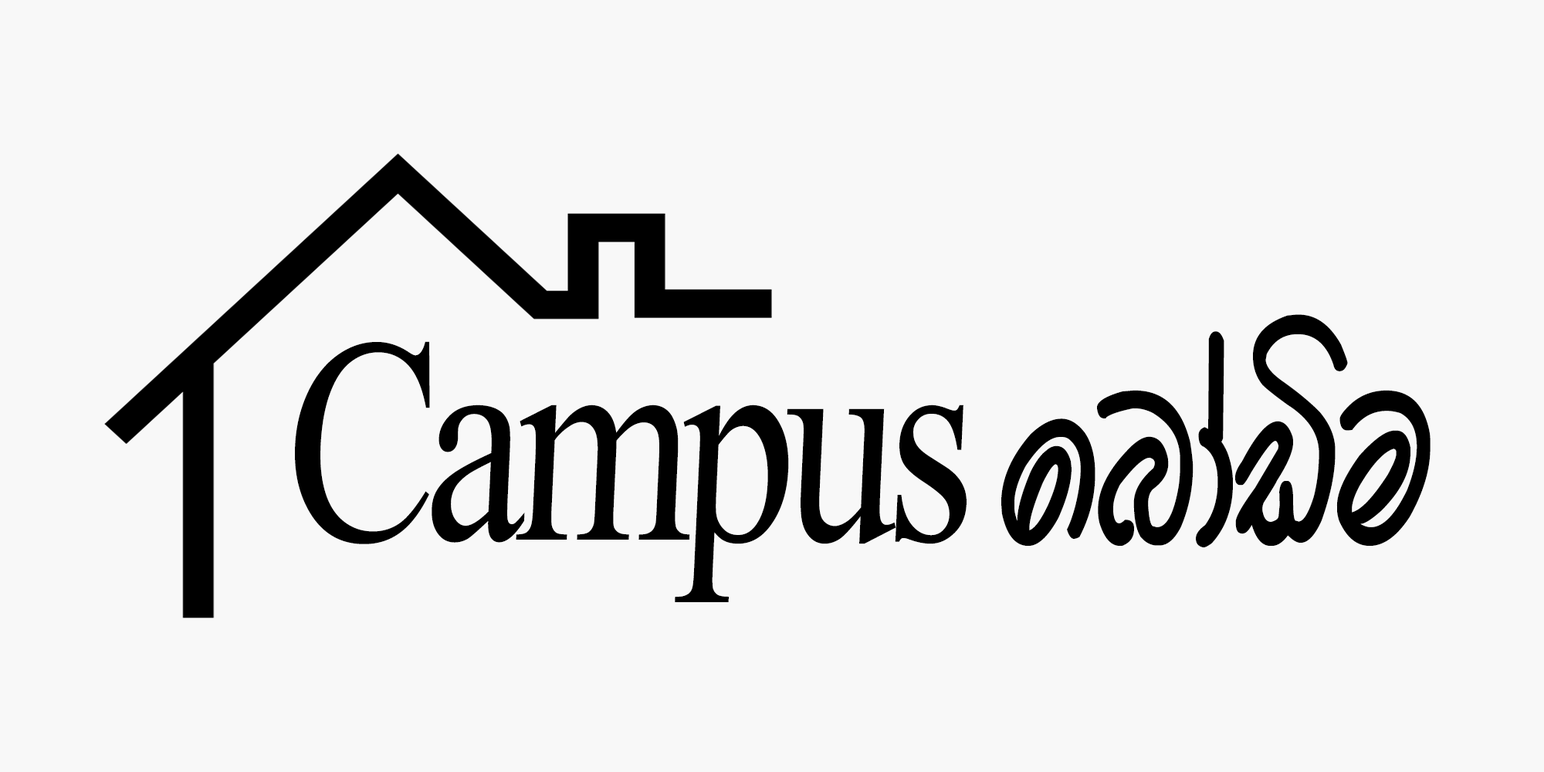
<style>
.page{position:relative;width:1544px;height:772px;background:#f8f8f8}
.page>*{position:absolute;margin:0}
.t1{font:225.9px "apex-a.pura-033";color:#000000;scale:0.78 1}
.t2{font:292.1px "TimesNewRomanPSMT";letter-spacing:-0.05em;color:#000000;scale:0.78 1}
</style>
<div class="page">
<p class="t1" style="left:1001px;top:314px;width:430px;height:233px">fndaäu</p>
<p class="t2" style="left:295px;top:341px;width:672px;height:261px">Campus</p>
</div>
